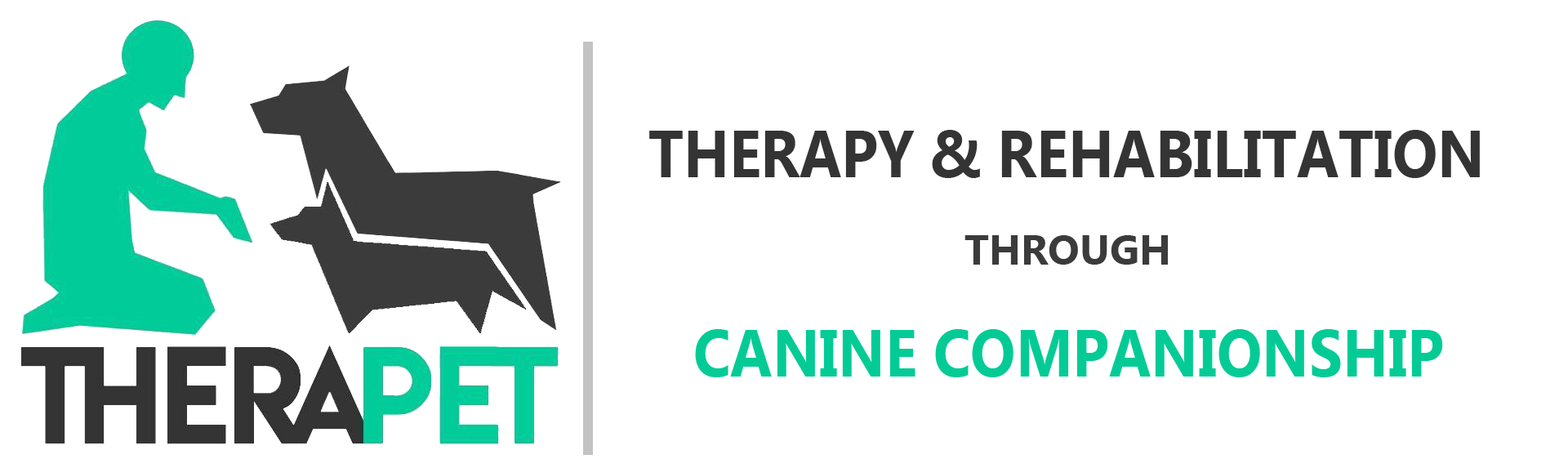
<style>
.page{position:relative;width:1568px;height:468px;background:#ffffff}
.page>*{position:absolute;margin:0}
.t1{font:66.4px "MicrosoftNewTaiLue-Bold";color:#343434;scale:0.9 1}
.t2{font:40.5px "MicrosoftNewTaiLue-Bold";color:#3b3b3b;scale:1.03 1}
.t3{font:66.4px "MicrosoftNewTaiLue-Bold";color:#04cb95;scale:0.9 1}
</style>
<div class="page">
<p class="t1" style="left:649px;top:130px;width:831px;height:48px">THERAPY &amp; REHABILITATION</p>
<p class="t2" style="left:964px;top:235px;width:204px;height:30px">THROUGH</p>
<p class="t3" style="left:695px;top:329px;width:748px;height:48px">CANINE COMPANIONSHIP</p>
</div>
